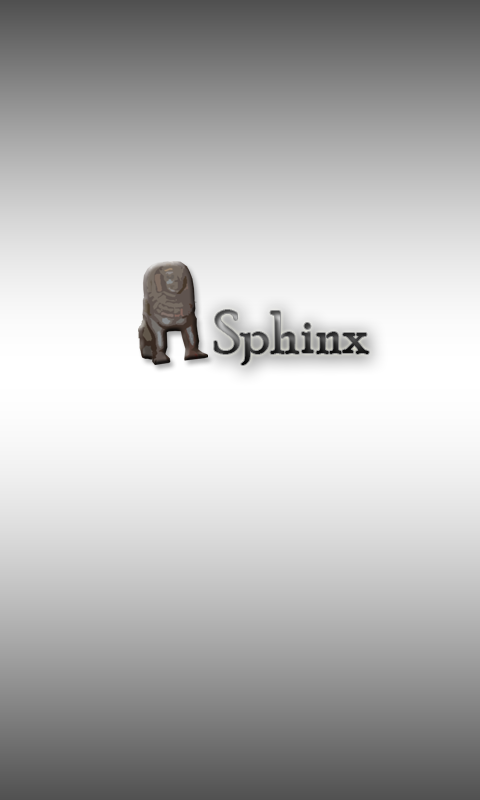
<style>
.page{position:relative;width:480px;height:800px}
.page>*{position:absolute;margin:0}
.t1{font:60px "PoorRichard-Regular"}
</style>
<div class="page">
<p class="t1" style="left:214px;top:310px;width:155px;height:55px">Sphinx</p>
</div>
